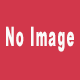
<style>
.page{position:relative;width:80px;height:80px;background:#d2374b}
.page>*{position:absolute;margin:0}
.t1{font:27px "Arial-Black";letter-spacing:0.1em;color:#fbfafa;scale:0.43 1}
</style>
<div class="page">
<p class="t1" style="left:6px;top:26px;width:68px;height:26px">No Image</p>
</div>
